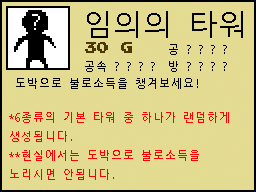
<style>
.page{position:relative;width:256px;height:192px;background:#e4db92}
.page>*{position:absolute;margin:0}
.t1{font:30px "NanumGothicCoding";color:#000000}
.t2{font:12px "PressStart2P";color:#4b3800}
.t3{font:11px "NanumGothicCoding";color:#000000}
.t4{font:11px "NanumGothicCoding";color:#ff0000}
</style>
<div class="page">
<p class="t1" style="left:87px;top:11px;width:156px;height:27px">임의의 타워</p>
<p class="t2" style="left:85px;top:42px;width:47px;height:11px">30 G</p>
<p class="t3" style="left:169px;top:44px;width:58px;height:11px">공 ? ? ? ?</p>
<p class="t3" style="left:85px;top:61px;width:142px;height:11px">공속 ? ? ? ?  방 ? ? ? ?</p>
<p class="t3" style="left:16px;top:78px;width:182px;height:11px">도박으로 불로소득을 챙겨보세요!</p>
<p class="t4" style="left:9px;top:112px;width:220px;height:68px">*6종류의 기본 타워 중 하나가 랜덤하게<br>생성됩니다.<br>**현실에서는 도박으로 불로소득을<br>노리시면 안됩니다.</p>
</div>
